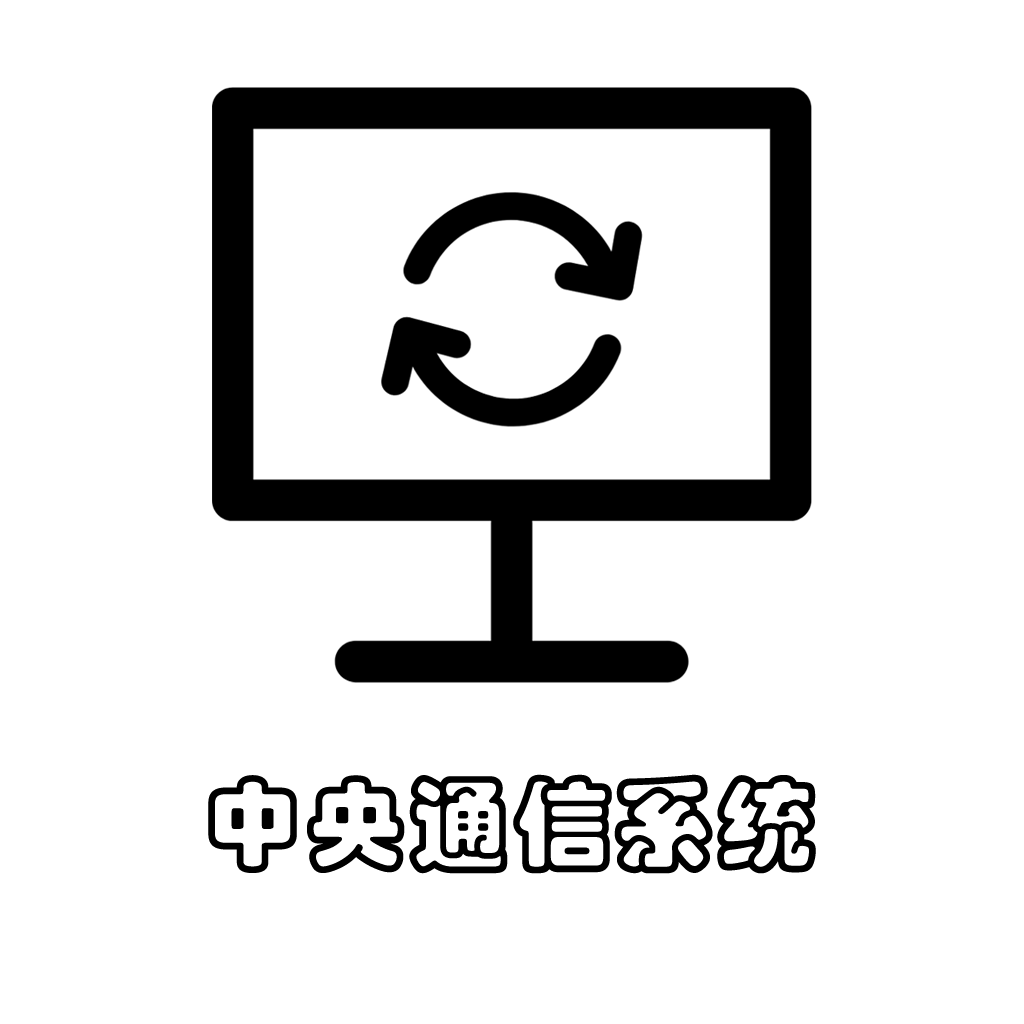
<style>
.page{position:relative;width:1024px;height:1024px;background:#ffffff}
.page>*{position:absolute;margin:0}
.t1{font:100px "STCaiyun";color:#000000;font-weight:bold}
</style>
<div class="page">
<p class="t1" style="left:208px;top:774px;width:608px;height:100px">中央通信系统</p>
</div>
